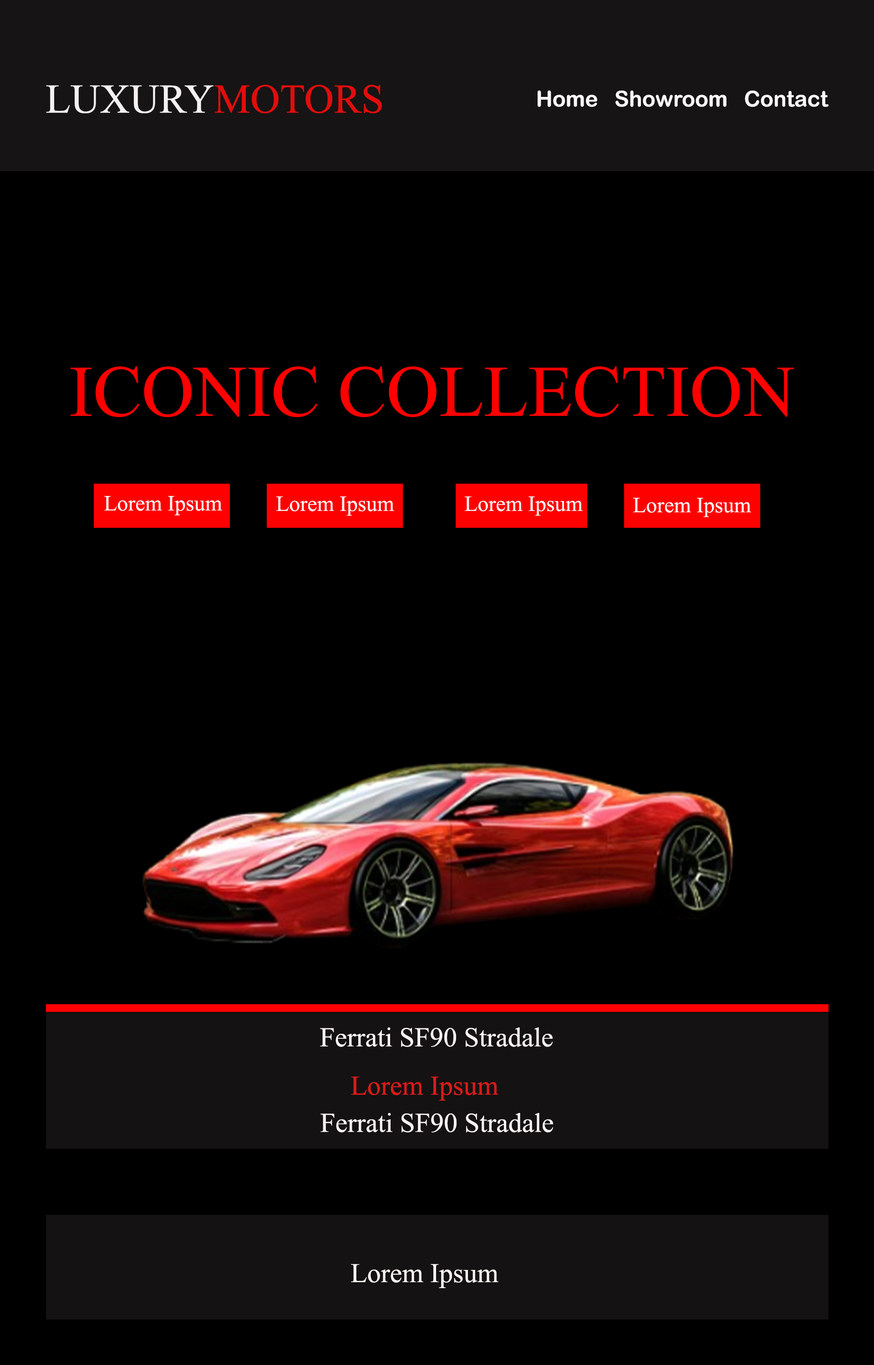
<style>
.page{position:relative;width:874px;height:1365px;background:#000000}
.page>*{position:absolute;margin:0}
.t1{font:41px "TimesNewRomanPSMT";color:#f5f1f1}
.t2{font:41px "TimesNewRomanPSMT";color:#e30c0c}
.t3{font:21.8px "ArialRoundedMTBold";color:#fcf8f8}
.t4{font:72.8px "TimesNewRomanPSMT";color:#ff0000}
.t5{font:21.8px "TimesNewRomanPSMT";color:#f7f1f1}
.t6{font:27.3px "TimesNewRomanPSMT";color:#fbf3f3}
.t7{font:27.3px "TimesNewRomanPSMT";color:#db1a1a}
</style>
<div class="page">
<p class="t1" style="left:46px;top:85px;width:336px;height:28px">LUXURY<span class="t2">MOTORS</span></p>
<p class="t3" style="left:537px;top:91px;width:292px;height:16px">Home   Showroom   Contact</p>
<p class="t4" style="left:71px;top:366px;width:723px;height:51px">ICONIC COLLECTION</p>
<p class="t5" style="left:104px;top:496px;width:118px;height:20px">Lorem Ipsum</p>
<p class="t5" style="left:276px;top:496px;width:118px;height:20px">Lorem Ipsum</p>
<p class="t5" style="left:464px;top:496px;width:118px;height:20px">Lorem Ipsum</p>
<p class="t5" style="left:632px;top:498px;width:119px;height:19px">Lorem Ipsum</p>
<p class="t6" style="left:320px;top:1027px;width:232px;height:20px">Ferrati SF90 Stradale</p>
<p class="t7" style="left:351px;top:1077px;width:147px;height:24px">Lorem Ipsum</p>
<p class="t6" style="left:320px;top:1113px;width:233px;height:19px">Ferrati SF90 Stradale</p>
<p class="t6" style="left:351px;top:1264px;width:147px;height:24px">Lorem Ipsum</p>
</div>
